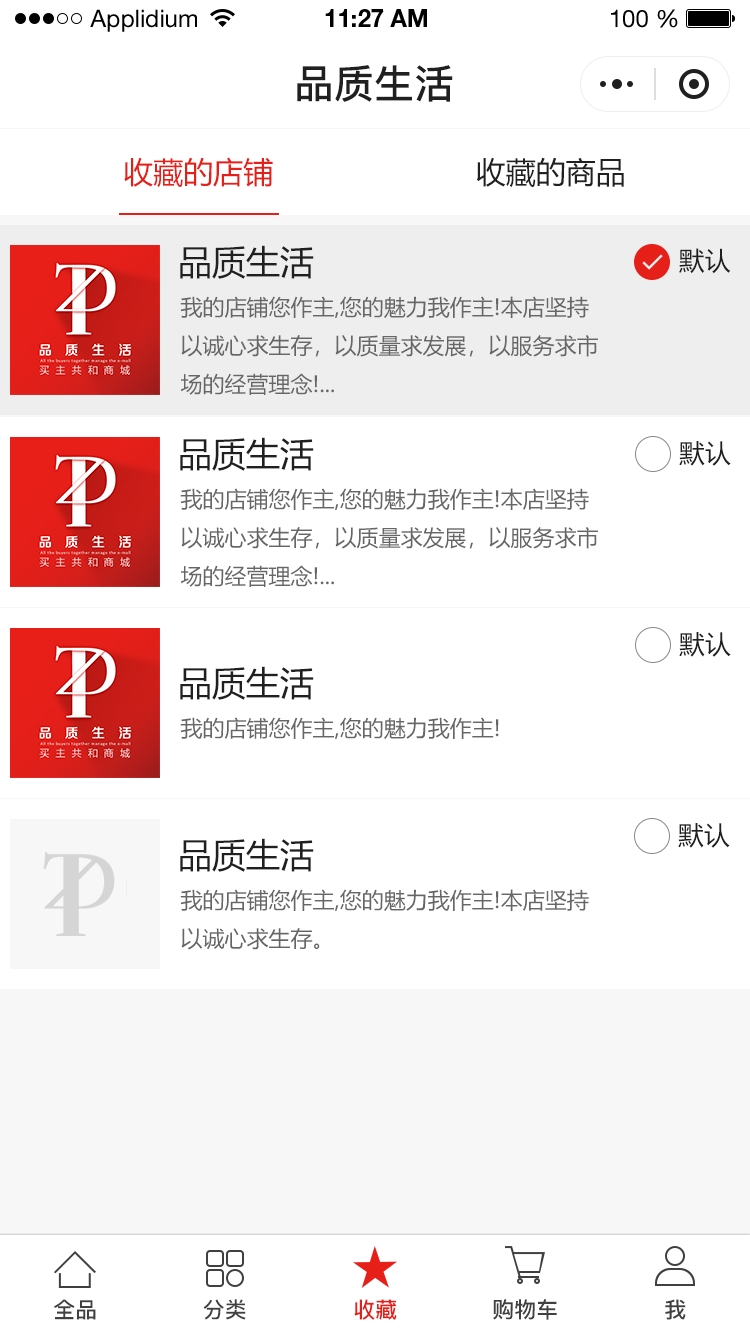
<style>
.page{position:relative;width:750px;height:1334px;background:#ffffff}
.page>*{position:absolute;margin:0}
.t1{font:24px "HelveticaNeueLTStd-Roman";color:#000000}
.t2{font:24px "HelveticaNeueLTStd-Bd";color:#000000}
.t3{font:40px "PingFang-SC-Bold";color:#202020;text-transform:uppercase}
.t4{font:30px "MicrosoftYaHei";color:#e61f18;text-transform:uppercase}
.t5{font:30px "MicrosoftYaHei";color:#202020;text-transform:uppercase}
.t6{font:34px "MicrosoftYaHei";color:#202020;text-transform:uppercase}
.t7{font:26px "MicrosoftYaHei";color:#202020;text-transform:uppercase}
.t8{font:22px "MicrosoftYaHei";color:#666666;text-transform:uppercase}
.t9{font:22px "PingFang-SC-Bold";color:#404040;text-transform:uppercase}
.t10{font:22px "PingFang-SC-Bold";color:#e61f18;text-transform:uppercase}
</style>
<div class="page">
<p class="t1" style="left:90px;top:9px;width:107px;height:23px">Applidium</p>
<p class="t2" style="left:325px;top:9px;width:102px;height:18px">11:27 AM</p>
<p class="t1" style="left:611px;top:9px;width:67px;height:19px">100 %</p>
<p class="t3" style="left:297px;top:65px;width:156px;height:37px">品质生活</p>
<p class="t4" style="left:124px;top:157px;width:149px;height:31px">收藏的店铺</p>
<p class="t5" style="left:476px;top:157px;width:148px;height:31px">收藏的商品</p>
<p class="t6" style="left:180px;top:245px;width:134px;height:34px">品质生活</p>
<p class="t7" style="left:679px;top:248px;width:52px;height:26px">默认</p>
<p class="t8" style="left:180px;top:296px;width:418px;height:99px">我的店铺您作主,您的魅力我作主!本店坚持<br>以诚心求生存，以质量求发展，以服务求市<br>场的经营理念!...</p>
<p class="t6" style="left:180px;top:437px;width:134px;height:34px">品质生活</p>
<p class="t7" style="left:679px;top:441px;width:52px;height:25px">默认</p>
<p class="t8" style="left:180px;top:488px;width:418px;height:99px">我的店铺您作主,您的魅力我作主!本店坚持<br>以诚心求生存，以质量求发展，以服务求市<br>场的经营理念!...</p>
<p class="t7" style="left:679px;top:632px;width:52px;height:25px">默认</p>
<p class="t6" style="left:180px;top:666px;width:134px;height:34px">品质生活</p>
<p class="t8" style="left:180px;top:717px;width:319px;height:23px">我的店铺您作主,您的魅力我作主!</p>
<p class="t7" style="left:678px;top:823px;width:52px;height:25px">默认</p>
<p class="t6" style="left:180px;top:838px;width:134px;height:34px">品质生活</p>
<p class="t8" style="left:180px;top:889px;width:409px;height:61px">我的店铺您作主,您的魅力我作主!本店坚持<br>以诚心求生存。</p>
<p class="t9" style="left:54px;top:1299px;width:42px;height:21px">全品</p>
<p class="t9" style="left:203px;top:1299px;width:43px;height:21px">分类</p>
<p class="t10" style="left:354px;top:1299px;width:43px;height:21px">收藏</p>
<p class="t9" style="left:493px;top:1299px;width:64px;height:21px">购物车</p>
<p class="t9" style="left:665px;top:1299px;width:21px;height:21px">我</p>
</div>
